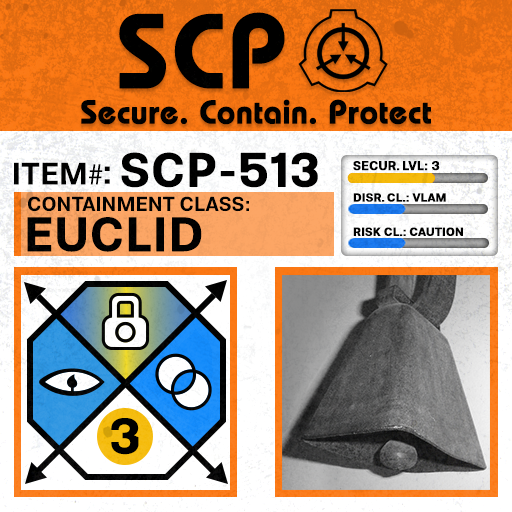
<style>
.page{position:relative;width:512px;height:512px}
.page>*{position:absolute;margin:0}
.t1{font:105.8px "BauhausLT-Demi";color:#000000;font-weight:bold}
.t2{font:33px "BauhausLT-Demi";color:#000000;font-weight:bold}
.t3{font:47.6px "Molde-Semibold";color:#000000;font-weight:bold}
.t4{font:12.5px "Molde-Semibold";color:#000000;font-weight:bold}
.t5{font:31.1px "Molde-Semibold";color:#000000}
.t6{font:31.1px "MyriadPro-Regular";color:#000000}
.t7{font:34.5px "Molde-Semibold";color:#000000}
.t8{font:20.3px "Molde-Semibold";color:#000000}
.t9{font:11.7px "Molde-Semibold";color:#000000;font-weight:bold}
.t10{font:47.8px "Molde-Semibold";color:#000000;font-weight:bold}
</style>
<div class="page">
<p class="t1" style="left:119px;top:12px;width:166px;height:77px">SCP</p>
<p class="t2" style="left:81px;top:99px;width:350px;height:26px">Secure. Contain. Protect</p>
<p class="t3" style="left:121px;top:152px;width:197px;height:36px">SCP-513</p>
<p class="t4" style="left:353px;top:161px;width:87px;height:10px">SECUR. LVL: 3</p>
<p class="t5" style="left:14px;top:162px;width:89px;height:23px">ITEM<span class="t6">#</span></p>
<p class="t7" style="left:104px;top:166px;width:6px;height:18px">:</p>
<p class="t8" style="left:28px;top:196px;width:221px;height:16px">CONTAINMENT CLASS:</p>
<p class="t9" style="left:353px;top:193px;width:93px;height:9px">DISR. CL.: VLAM</p>
<p class="t10" style="left:27px;top:217px;width:175px;height:35px">EUCLID</p>
<p class="t9" style="left:353px;top:227px;width:110px;height:9px">RISK CL.: CAUTION</p>
</div>
